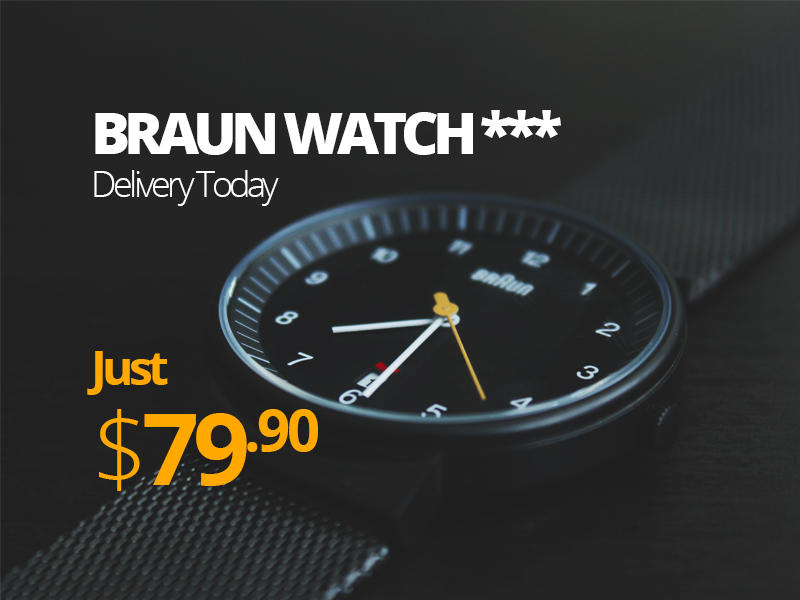
<style>
.page{position:relative;width:800px;height:600px}
.page>*{position:absolute;margin:0}
.t1{font:57.6px "OpenSans-Extrabold";letter-spacing:-0.1em;color:#ffffff}
.t2{font:36px "OpenSans-Light";letter-spacing:-0.1em;color:#ffffff}
.t3{font:48px "OpenSans-Bold";letter-spacing:-0.1em;color:#ffa800}
.t4{font:100px/100px "OpenSans-Light";letter-spacing:-0.06em;color:#ffa800}
.t5{font:100px/100px "OpenSans-Bold";letter-spacing:-0.06em;color:#ffa800}
</style>
<div class="page">
<p class="t1" style="left:87px;top:110px;width:474px;height:381px">BRAUN WATCH ***<br><span class="t2">Delivery Today<br><br><br><br></span><span class="t3">Just<br></span><span class="t4">$</span><span class="t5">79.90</span></p>
</div>
